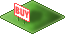
<style>
.page{position:relative;width:65px;height:34px;background:#ffffff}
.page>*{position:absolute;margin:0}
.t1{font:10px "MyriadPro-BoldCond";letter-spacing:-0.005em;color:#ff4f4f;scale:1.09 1}
</style>
<div class="page">
<p class="t1" style="left:15px;top:6px;width:14px;height:13px;rotate:23deg">BUY</p>
</div>
